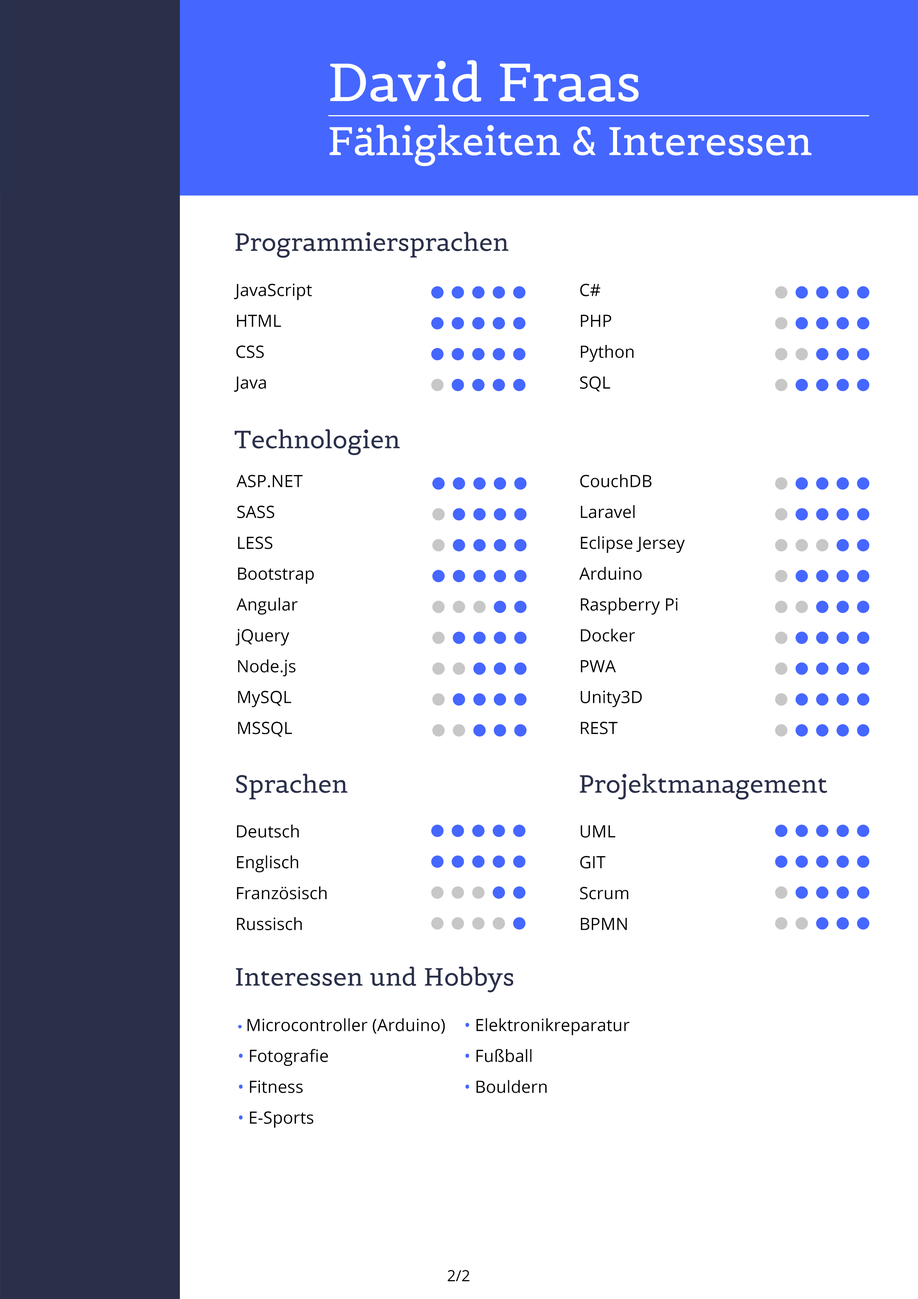
<style>
.page{position:relative;width:918px;height:1299px;background:#ffffff}
.page>*{position:absolute;margin:0}
.t1{font:39.3px/54px "Belgrano-Regular";color:#ffffff}
.t2{font:52.8px/54px "Belgrano-Regular";color:#ffffff}
.t3{font:24.7px "Belgrano-Regular";color:#2a304a}
.t4{font:17px/30.9px "OpenSans";color:#000000}
.t5{font:17px/30.9px "MyriadPro-Regular";color:#4567ff}
.t6{font:17px/30.9px "OpenSans";color:#4567ff}
.t7{font:15.4px "OpenSans";color:#000000}
</style>
<div class="page">
<p class="t1" style="left:329px;top:60px;width:483px;height:106px"><span class="t2">David Fraas<br></span>Fähigkeiten &amp; Interessen</p>
<p class="t3" style="left:235px;top:232px;width:274px;height:26px">Programmiersprachen</p>
<p class="t4" style="left:234px;top:283px;width:78px;height:109px">JavaScript<br>HTML<br>CSS<br>Java</p>
<p class="t4" style="left:580px;top:284px;width:54px;height:108px">C#<br>PHP<br>Python<br>SQL</p>
<p class="t3" style="left:235px;top:429px;width:165px;height:26px">Technologien</p>
<p class="t4" style="left:579px;top:474px;width:106px;height:260px">CouchDB<br>Laravel<br>Eclipse Jersey<br>Arduino<br>Raspberry Pi<br>Docker<br>PWA<br>Unity3D<br>REST</p>
<p class="t4" style="left:235px;top:475px;width:79px;height:262px">ASP.NET<br>SASS<br>LESS<br>Bootstrap<br>Angular<br>jQuery<br>Node.js<br>MySQL<br>MSSQL</p>
<p class="t3" style="left:236px;top:773px;width:112px;height:26px">Sprachen</p>
<p class="t3" style="left:580px;top:773px;width:247px;height:27px">Projektmanagement</p>
<p class="t4" style="left:237px;top:824px;width:90px;height:106px">Deutsch<br>Englisch<br>Französisch<br>Russisch</p>
<p class="t4" style="left:580px;top:825px;width:49px;height:105px">UML<br>GIT<br>Scrum<br>BPMN</p>
<p class="t3" style="left:236px;top:966px;width:277px;height:26px">Interessen und Hobbys</p>
<p class="t4" style="left:238px;top:1018px;width:392px;height:110px"><span class="t5">• </span>Microcontroller (Arduino)   <span class="t6">• </span>Elektronikreparatur <br><span class="t6">• </span>Fotografie           <span class="t6">• </span>Fußball<br><span class="t6">• </span>Fitness             <span class="t6">• </span>Bouldern<br><span class="t6">• </span>E-Sports</p>
<p class="t7" style="left:448px;top:1269px;width:21px;height:12px">2/2</p>
</div>
